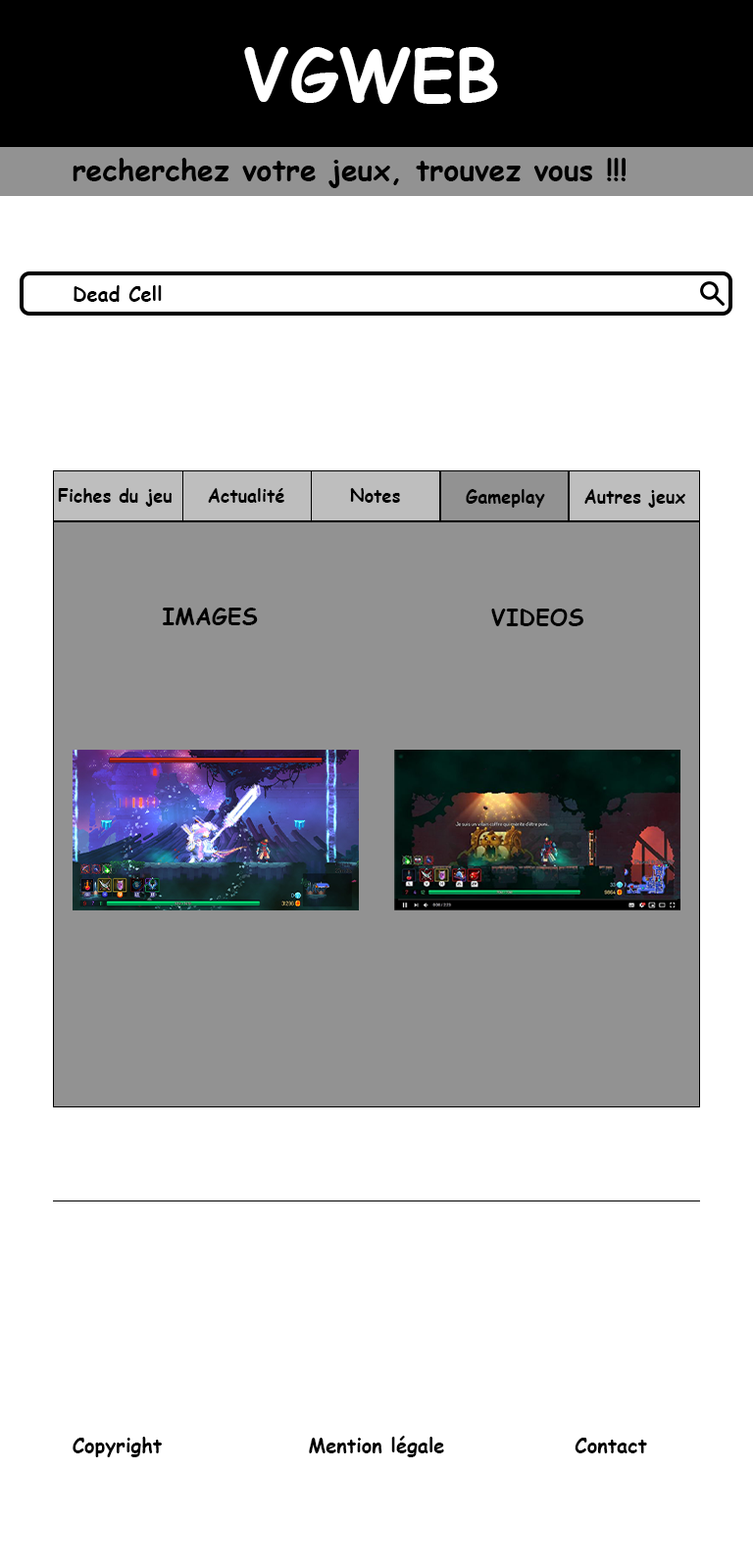
<style>
.page{position:relative;width:753px;height:1568px;background:#ffffff}
.page>*{position:absolute;margin:0}
.t1{font:70.6px "ComicSansMS-Bold";color:#ffffff}
.t2{font:29.4px "ComicSansMS-Bold";color:#000000}
.t3{font:19.6px "ComicSansMS-Bold";color:#000000}
.t4{font:17.6px "ComicSansMS-Bold";color:#000000}
.t5{font:23px "ComicSansMS-Bold";color:#000000}
</style>
<div class="page">
<p class="t1" style="left:244px;top:47px;width:254px;height:57px">VGWEB</p>
<p class="t2" style="left:73px;top:158px;width:552px;height:30px">recherchez votre jeux, trouvez vous !!!</p>
<p class="t3" style="left:74px;top:285px;width:88px;height:17px">Dead Cell</p>
<p class="t4" style="left:58px;top:488px;width:114px;height:19px">Fiches du jeu</p>
<p class="t4" style="left:208px;top:488px;width:76px;height:15px">Actualité</p>
<p class="t4" style="left:350px;top:488px;width:50px;height:15px">Notes</p>
<p class="t4" style="left:466px;top:489px;width:79px;height:19px">Gameplay</p>
<p class="t4" style="left:584px;top:489px;width:101px;height:19px">Autres jeux</p>
<p class="t5" style="left:163px;top:608px;width:95px;height:17px">IMAGES</p>
<p class="t5" style="left:491px;top:609px;width:92px;height:17px">VIDEOS</p>
<p class="t3" style="left:73px;top:1437px;width:89px;height:20px">Copyright</p>
<p class="t3" style="left:309px;top:1436px;width:135px;height:21px">Mention légale</p>
<p class="t3" style="left:574px;top:1438px;width:73px;height:15px">Contact</p>
</div>
